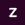
<style>
.page{position:relative;width:25px;height:25px;background:#2c0425}
.page>*{position:absolute;margin:0}
.t1{font:14px "Karla-Bold";letter-spacing:-0.01em;color:#ffffff;text-transform:uppercase}
</style>
<div class="page">
<p class="t1" style="left:9px;top:7px;width:8px;height:11px">z</p>
</div>
